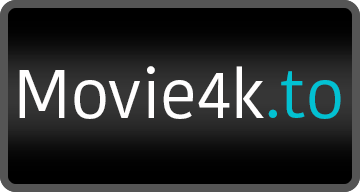
<style>
.page{position:relative;width:360px;height:192px}
.page>*{position:absolute;margin:0}
.t1{font:68px "KohinoorBangla-Regular";color:#fffefe}
.t2{font:68px "KohinoorBangla-Regular";color:#02c1d2}
</style>
<div class="page">
<p class="t1" style="left:19px;top:66px;width:322px;height:53px">Movie4k<span class="t2">.to</span></p>
</div>
